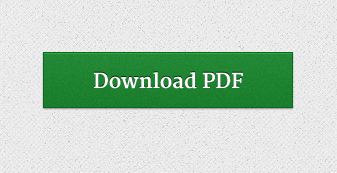
<style>
.page{position:relative;width:337px;height:173px}
.page>*{position:absolute;margin:0}
.t1{font:20px "Merriweather-Bold";color:#ffffff}
</style>
<div class="page">
<p class="t1" style="left:94px;top:72px;width:149px;height:17px">Download PDF</p>
</div>
